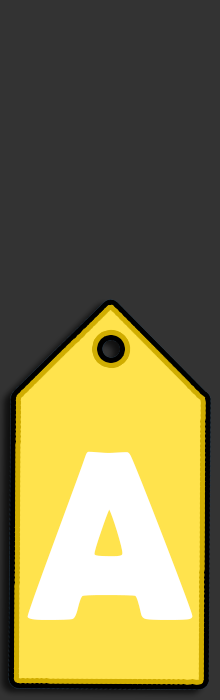
<style>
.page{position:relative;width:220px;height:700px;background:#333333}
.page>*{position:absolute;margin:0}
.t1{font:240px "BerlinSansFBDemi-Bold";letter-spacing:0.075em;color:#ffffff}
</style>
<div class="page">
<p class="t1" style="left:27px;top:451px;width:166px;height:169px">A</p>
</div>
